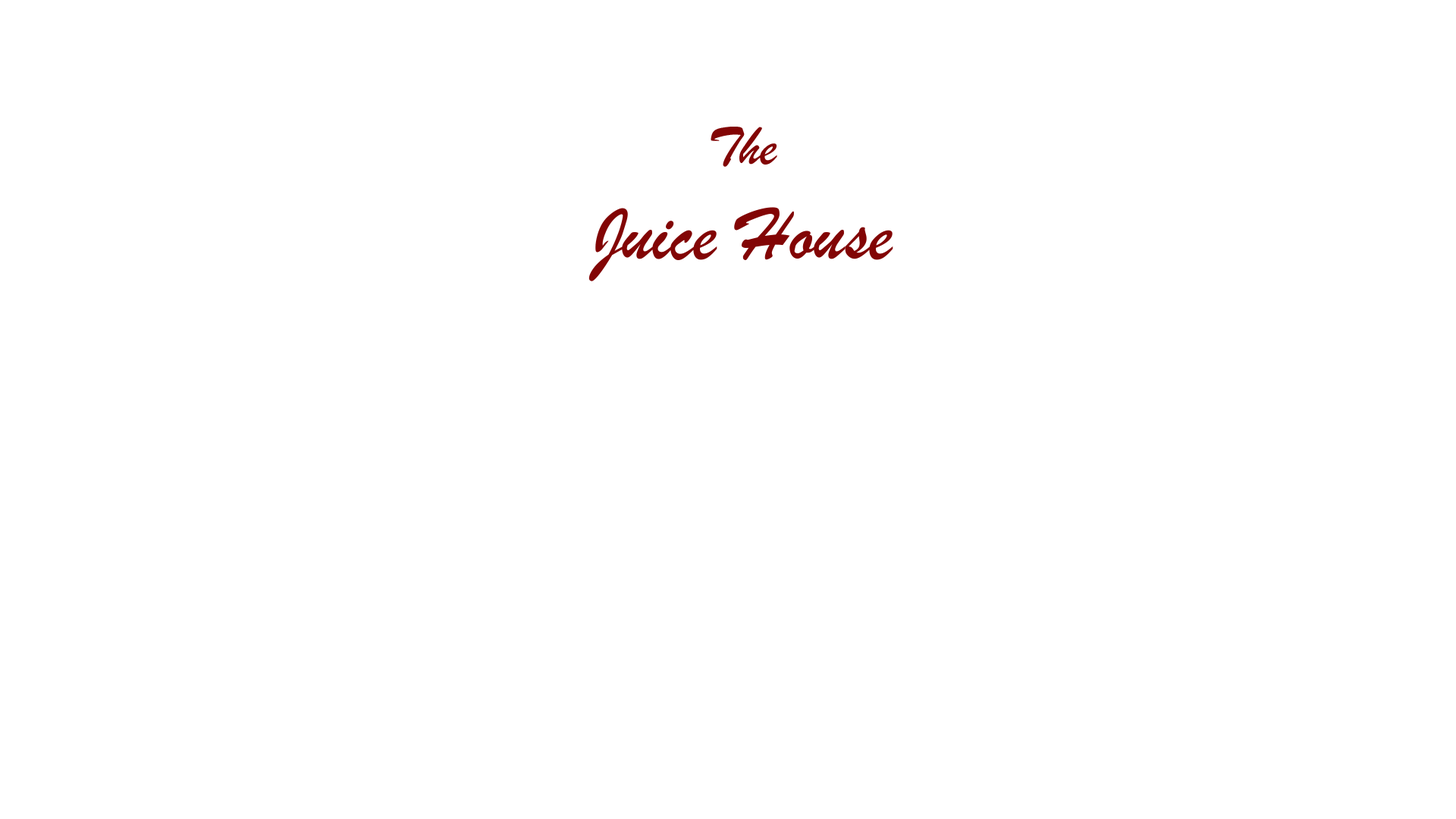
<style>
.page{position:relative;width:1456px;height:819px;background:#ffffff}
.page>*{position:absolute;margin:0}
.t1{font:79px "BrushScriptMT";color:#820505}
.t2{font:56.9px "BrushScriptMT";color:#820505}
</style>
<div class="page">
<p class="t1" style="left:588px;top:127px;width:305px;height:154px;text-align:center"><span class="t2">The</span> <br>Juice House</p>
</div>
